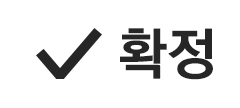
<style>
.page{position:relative;width:240px;height:108px;background:#ffffff}
.page>*{position:absolute;margin:0}
.t1{font:55px "KoPubDotumBold";color:#262626;font-weight:bold}
</style>
<div class="page">
<p class="t1" style="left:120px;top:28px;width:93px;height:52px">확정</p>
</div>
